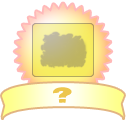
<style>
.page{position:relative;width:126px;height:120px;background:#ffffff}
.page>*{position:absolute;margin:0}
.t1{font:19.5px "Arial-Black";letter-spacing:0.045em;color:#edc64e;text-transform:uppercase}
</style>
<div class="page">
<p class="t1" style="left:53px;top:87px;width:19px;height:16px">?</p>
</div>
